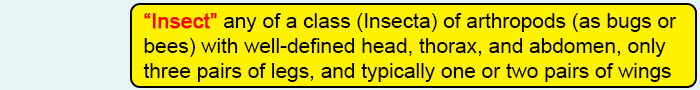
<style>
.page{position:relative;width:700px;height:90px;background:#fff200}
.page>*{position:absolute;margin:0}
.t1{font:20.8px "ArialMT";color:#020202}
.t2{font:20.8px "ArialMT";color:#fd010d;font-weight:bold}
</style>
<div class="page">
<p class="t1" style="left:143px;top:13px;width:534px;height:69px"><span class="t2">“Insect”</span> any of a class (Insecta) of arthropods (as bugs or <br>bees) with well-defined head, thorax, and abdomen, only <br>three pairs of legs, and typically one or two pairs of wings</p>
</div>
